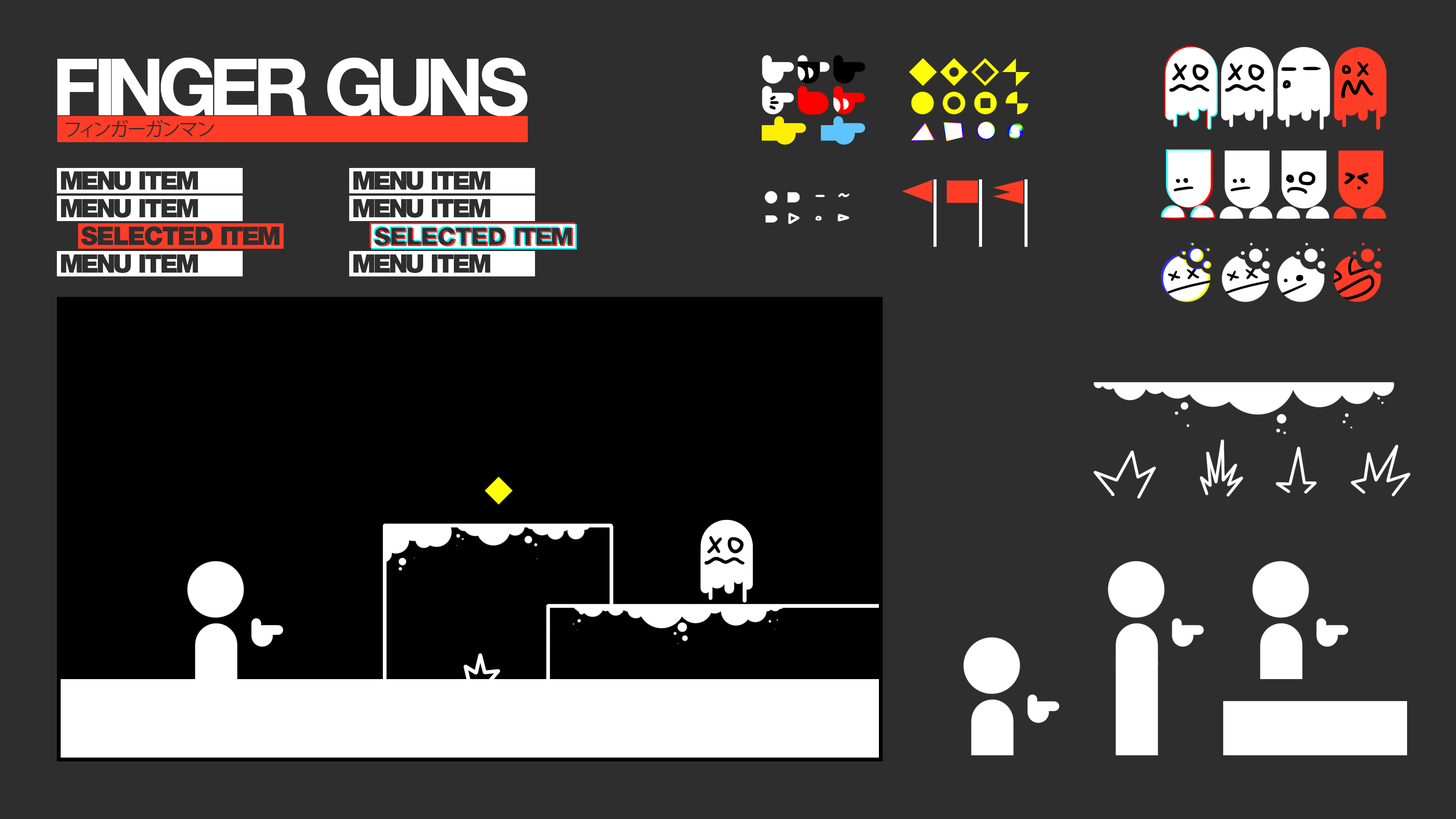
<style>
.page{position:relative;width:1456px;height:819px;background:#2e2e2e}
.page>*{position:absolute;margin:0}
.t1{font:79px "HelveticaNeueLTStd-Bd";letter-spacing:-0.05em;color:#ffffff}
.t2{font:19px "KozGoPr6N-Regular";letter-spacing:-0.05em;color:#2e2e2e}
.t3{font:25.3px "HelveticaNeueLTStd-Blk";letter-spacing:-0.05em;color:#2e2e2e}
</style>
<div class="page">
<p class="t1" style="left:57px;top:57px;width:470px;height:60px">FINGER GUNS</p>
<p class="t2" style="left:66px;top:120px;width:148px;height:17px">フィンガーガンマン</p>
<p class="t3" style="left:61px;top:171px;width:137px;height:19px">MENU ITEM</p>
<p class="t3" style="left:353px;top:171px;width:137px;height:19px">MENU ITEM</p>
<p class="t3" style="left:61px;top:199px;width:137px;height:19px">MENU ITEM</p>
<p class="t3" style="left:353px;top:199px;width:137px;height:19px">MENU ITEM</p>
<p class="t3" style="left:81px;top:226px;width:198px;height:19px">SELECTED ITEM</p>
<p class="t3" style="left:61px;top:254px;width:137px;height:19px">MENU ITEM</p>
<p class="t3" style="left:353px;top:254px;width:137px;height:19px">MENU ITEM</p>
</div>
